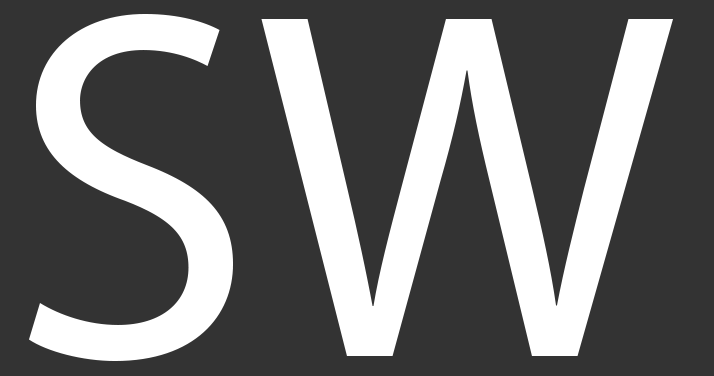
<style>
.page{position:relative;width:714px;height:376px;background:#333333}
.page>*{position:absolute;margin:0}
.t1{font:500px "MyriadPro-Regular";color:#ffffff}
</style>
<div class="page">
<p class="t1" style="left:29px;top:14px;width:644px;height:347px">SW</p>
</div>
